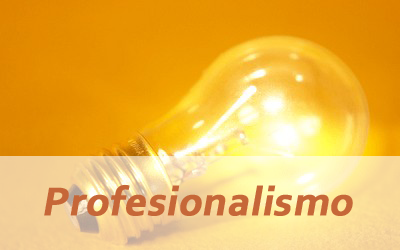
<style>
.page{position:relative;width:400px;height:250px}
.page>*{position:absolute;margin:0}
.t1{font:41.7px "Corbel-Bold";letter-spacing:0.005em;color:#c66738;font-weight:bold;font-style:italic}
</style>
<div class="page">
<p class="t1" style="left:44px;top:185px;width:309px;height:31px">Profesionalismo</p>
</div>
